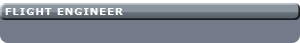
<style>
.page{position:relative;width:300px;height:43px;background:#737a89}
.page>*{position:absolute;margin:0}
.t1{font:10px "Verdana-Bold";letter-spacing:0.1em;color:#ffffff}
</style>
<div class="page">
<p class="t1" style="left:5px;top:8px;width:118px;height:7px">FLIGHT ENGINEER</p>
</div>
